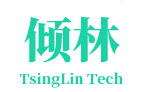
<style>
.page{position:relative;width:142px;height:92px;background:#ffffff}
.page>*{position:absolute;margin:0}
.t1{font:48px "SourceHanSerifSC-Heavy";color:#1bd1a5}
.t2{font:14px "SourceHanSerifSC-Heavy";color:#1bd1a5}
</style>
<div class="page">
<p class="t1" style="left:24px;top:16px;width:96px;height:47px">倾林</p>
<p class="t2" style="left:20px;top:72px;width:103px;height:16px">TsingLin Tech</p>
</div>
